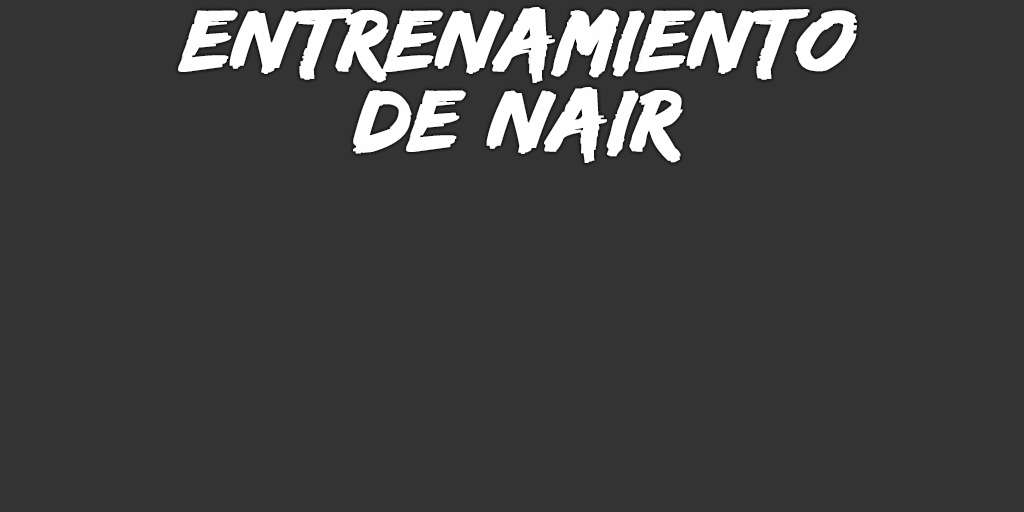
<style>
.page{position:relative;width:1024px;height:512px;background:#333333}
.page>*{position:absolute;margin:0}
.t1{font:90px/80px "EdoSZ";color:#fefefe;font-weight:bold;font-style:italic;scale:1.04 1}
</style>
<div class="page">
<p class="t1" style="left:178px;top:7px;width:679px;height:156px;text-align:center">entrenamiento<br>de nair</p>
</div>
